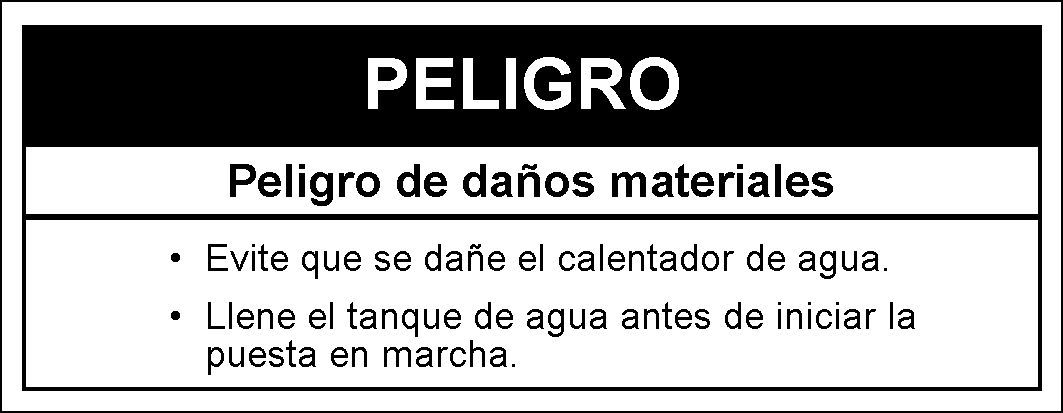
<style>
.page{position:relative;width:1063px;height:413px;background:#ffffff}
.page>*{position:absolute;margin:0}
.t1{font:70.8px "Arial-BoldMT";color:#ffffff}
.t2{font:45.8px "Arial-BoldMT";color:#010101}
.t3{font:37.5px/37.5px "ArialMT";color:#010101}
</style>
<div class="page">
<p class="t1" style="left:368px;top:57px;width:311px;height:53px">PELIGRO</p>
<p class="t2" style="left:230px;top:164px;width:603px;height:42px">Peligro de daños materiales</p>
<p class="t3" style="left:171px;top:244px;width:744px;height:131px;text-align:justify">• Evite que se dañe el calentador de agua.<br>• Llene el tanque de agua antes de iniciar la   puesta en marcha.</p>
</div>
